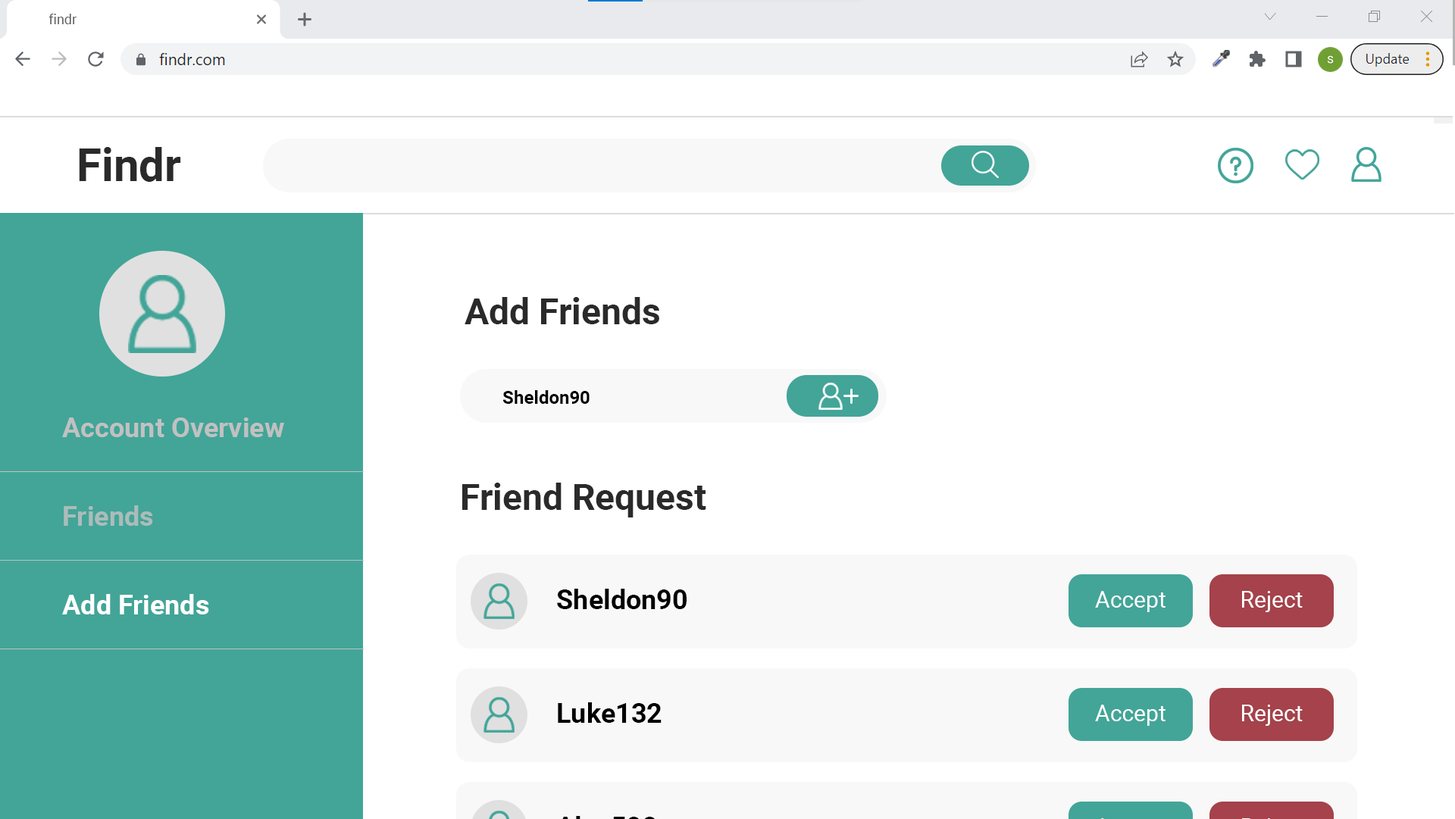
<style>
.page{position:relative;width:1455px;height:819px;background:#ffffff}
.page>*{position:absolute;margin:0}
.t1{font:13.6px "Roboto-Regular";color:#5f5f5f}
.t2{font:45.5px "Roboto-Bold";color:#2a2a2a}
.t3{font:36.4px "Roboto-Bold";color:#2a2a2a}
.t4{font:18.2px "Roboto-Bold";color:#000000}
.t5{font:27.3px "Roboto-Bold";color:#c1c1c1}
.t6{font:27.3px "Roboto-Bold";color:#acbcba}
.t7{font:27.3px "Roboto-Bold";color:#000000}
.t8{font:22.7px "Roboto-Regular";color:#ffffff}
.t9{font:27.3px "Roboto-Bold";color:#ffffff}
</style>
<div class="page">
<p class="t1" style="left:49px;top:14px;width:28px;height:10px">findr</p>
<p class="t2" style="left:79px;top:147px;width:102px;height:35px">Findr</p>
<p class="t3" style="left:465px;top:297px;width:194px;height:27px">Add Friends</p>
<p class="t4" style="left:503px;top:390px;width:87px;height:14px">Sheldon90</p>
<p class="t5" style="left:62px;top:418px;width:222px;height:19px">Account Overview</p>
<p class="t3" style="left:462px;top:483px;width:244px;height:35px">Friend Request</p>
<p class="t6" style="left:64px;top:506px;width:89px;height:20px">Friends</p>
<p class="t7" style="left:557px;top:589px;width:130px;height:20px">Sheldon90</p>
<p class="t8" style="left:1095px;top:591px;width:71px;height:21px">Accept</p>
<p class="t8" style="left:1242px;top:591px;width:61px;height:21px">Reject</p>
<p class="t9" style="left:62px;top:594px;width:147px;height:21px">Add Friends</p>
<p class="t7" style="left:558px;top:703px;width:104px;height:20px">Luke132</p>
<p class="t8" style="left:1095px;top:705px;width:71px;height:21px">Accept</p>
<p class="t8" style="left:1242px;top:705px;width:61px;height:21px">Reject</p>
</div>
